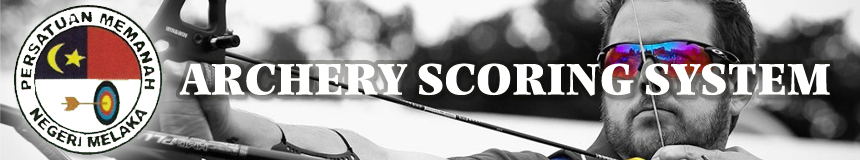
<style>
.page{position:relative;width:860px;height:160px}
.page>*{position:absolute;margin:0}
.t1{font:45.8px "PhotinaCasualBlack";color:#fefefe}
</style>
<div class="page">
<p class="t1" style="left:179px;top:63px;width:651px;height:33px">ARCHERY SCORING SYSTEM</p>
</div>
